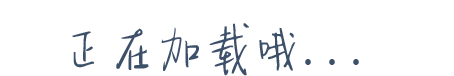
<style>
.page{position:relative;width:454px;height:76px;background:#ffffff}
.page>*{position:absolute;margin:0}
.t1{font:48px "SentyTEA-basic";color:#3d5069}
.t2{font:48px "SimSun";color:#3d5069}
</style>
<div class="page">
<p class="t1" style="left:72px;top:23px;width:287px;height:53px">正在加载哦<span class="t2">...</span></p>
</div>
